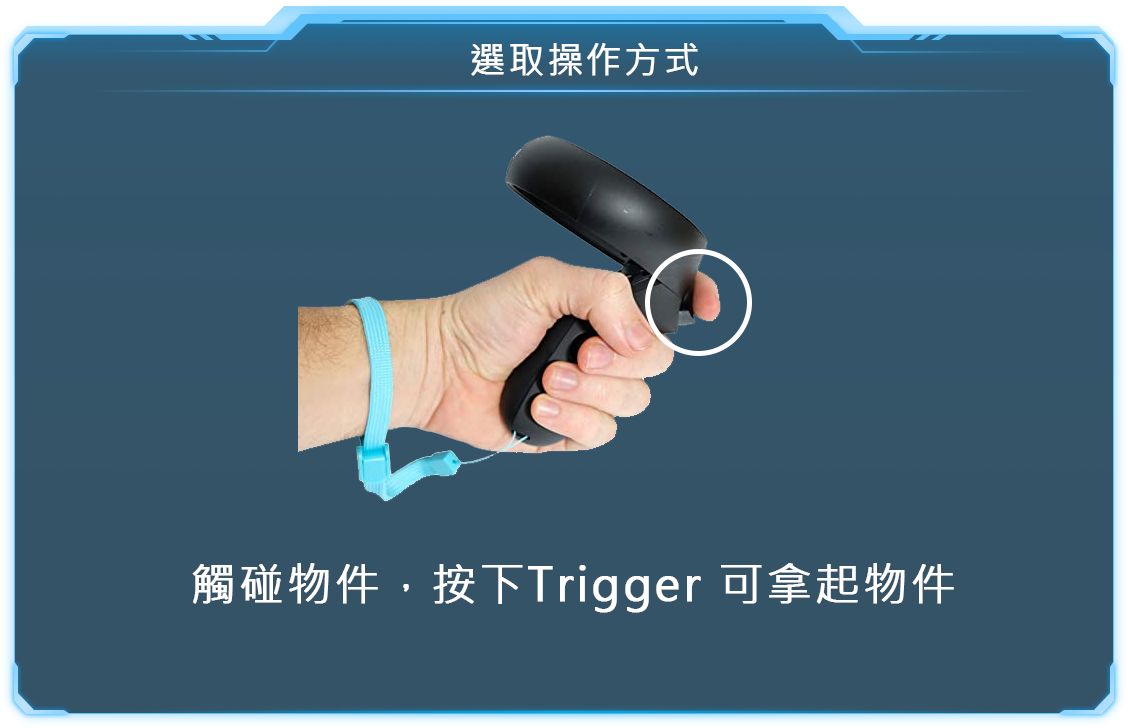
<style>
.page{position:relative;width:1128px;height:728px}
.page>*{position:absolute;margin:0}
.t1{font:36px "MicrosoftJhengHeiRegular";letter-spacing:0.05em;color:#ffffff;font-weight:bold}
.t2{font:44.7px "MicrosoftJhengHeiRegular";letter-spacing:0.05em;color:#ffffff;font-weight:bold}
</style>
<div class="page">
<p class="t1" style="left:471px;top:43px;width:227px;height:33px">選取操作方式</p>
<p class="t2" style="left:192px;top:563px;width:762px;height:50px">觸碰物件，按下Trigger 可拿起物件</p>
</div>
